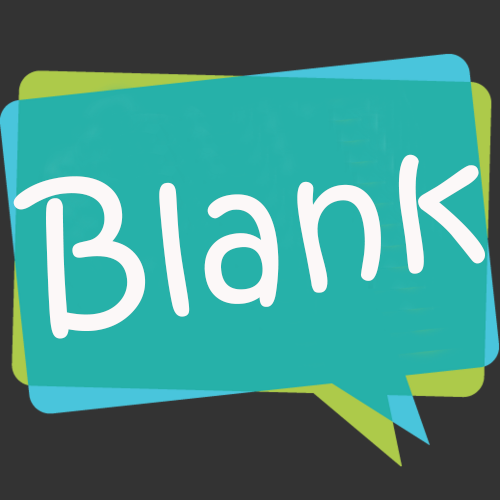
<style>
.page{position:relative;width:500px;height:500px;background:#26b1a9}
.page>*{position:absolute;margin:0}
.t1{font:170.8px "KristenITC-Regular";color:#fcf8f8}
</style>
<div class="page">
<p class="t1" style="left:13px;top:154px;width:472px;height:185px;rotate:-6deg">Blank</p>
</div>
